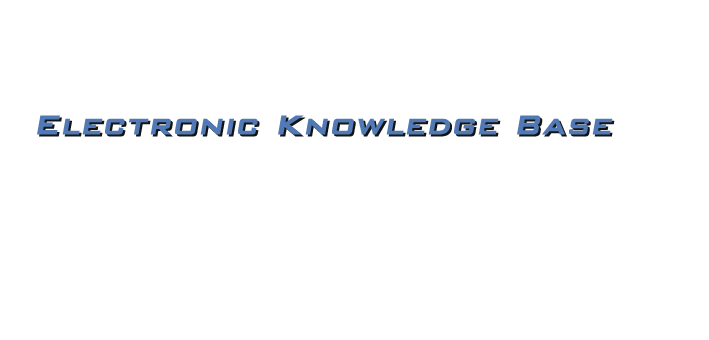
<style>
.page{position:relative;width:709px;height:340px;background:#ffffff}
.page>*{position:absolute;margin:0}
.t1{font:35px "BankGothicBT-Medium";color:#5179b5;font-weight:bold;font-style:italic}
</style>
<div class="page">
<p class="t1" style="left:37px;top:115px;width:576px;height:20px">Electronic Knowledge Base</p>
</div>
